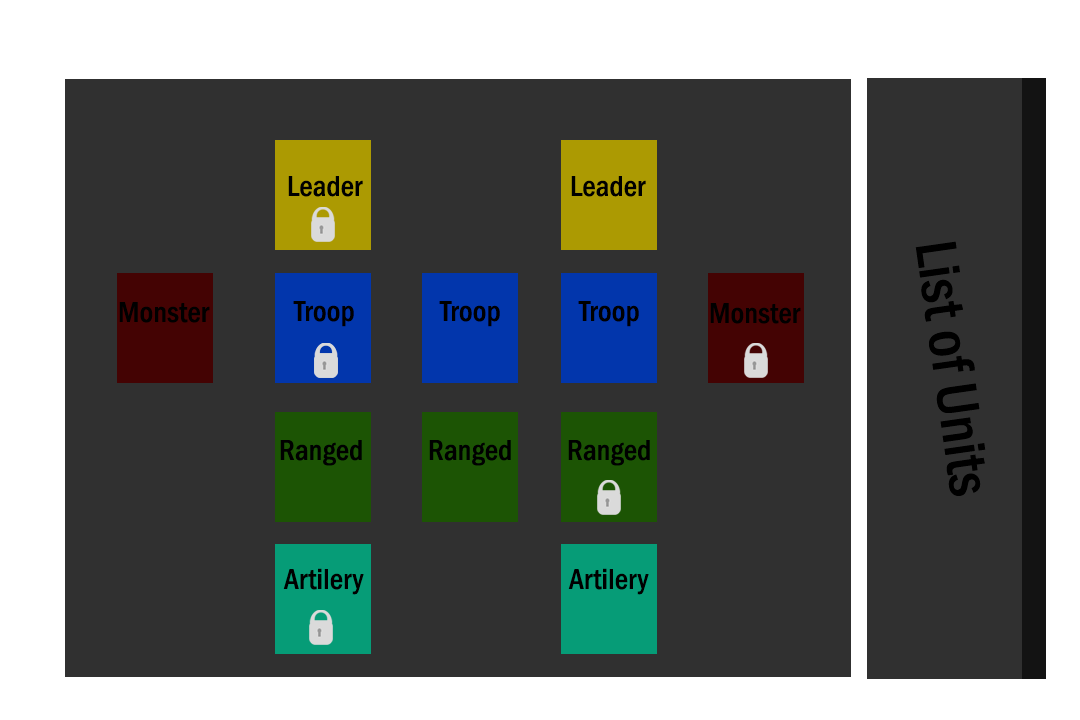
<style>
.page{position:relative;width:1080px;height:720px;background:#303030}
.page>*{position:absolute;margin:0}
.t1{font:30px "FranklinGothic-MediumCond";color:#000000}
.t2{font:60px "FranklinGothic-MediumCond";color:#000000}
</style>
<div class="page">
<p class="t1" style="left:288px;top:176px;width:75px;height:21px">Leader</p>
<p class="t1" style="left:571px;top:176px;width:75px;height:21px">Leader</p>
<p class="t2" style="left:915px;top:241px;width:71px;height:255px;rotate:82deg">List of Units</p>
<p class="t1" style="left:119px;top:302px;width:91px;height:21px">Monster</p>
<p class="t1" style="left:293px;top:301px;width:61px;height:26px">Troop</p>
<p class="t1" style="left:439px;top:301px;width:61px;height:26px">Troop</p>
<p class="t1" style="left:578px;top:301px;width:61px;height:26px">Troop</p>
<p class="t1" style="left:710px;top:303px;width:91px;height:21px">Monster</p>
<p class="t1" style="left:280px;top:440px;width:82px;height:26px">Ranged</p>
<p class="t1" style="left:429px;top:440px;width:82px;height:26px">Ranged</p>
<p class="t1" style="left:568px;top:440px;width:82px;height:26px">Ranged</p>
<p class="t1" style="left:283px;top:568px;width:81px;height:27px">Artilery</p>
<p class="t1" style="left:568px;top:568px;width:81px;height:27px">Artilery</p>
</div>
